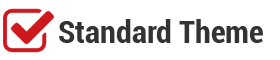
<style>
.page{position:relative;width:280px;height:60px;background:#ffffff}
.page>*{position:absolute;margin:0}
.t1{font:32px "Roboto-BoldCondensed";color:#333333}
</style>
<div class="page">
<p class="t1" style="left:59px;top:19px;width:204px;height:24px">Standard Theme</p>
</div>
